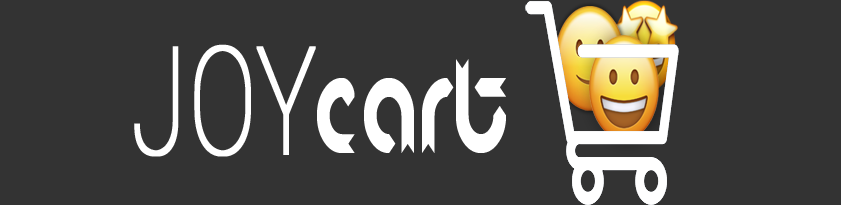
<style>
.page{position:relative;width:841px;height:205px;background:#333333}
.page>*{position:absolute;margin:0}
.t1{font:150px "Lenta";color:#ffffff;scale:0.67 1}
.t2{font:150px "Roboto-Thin";color:#ffffff;font-weight:bold;scale:0.67 1}
</style>
<div class="page">
<p class="t1" style="left:134px;top:44px;width:372px;height:113px"><span class="t2">JOY</span>cart</p>
</div>
